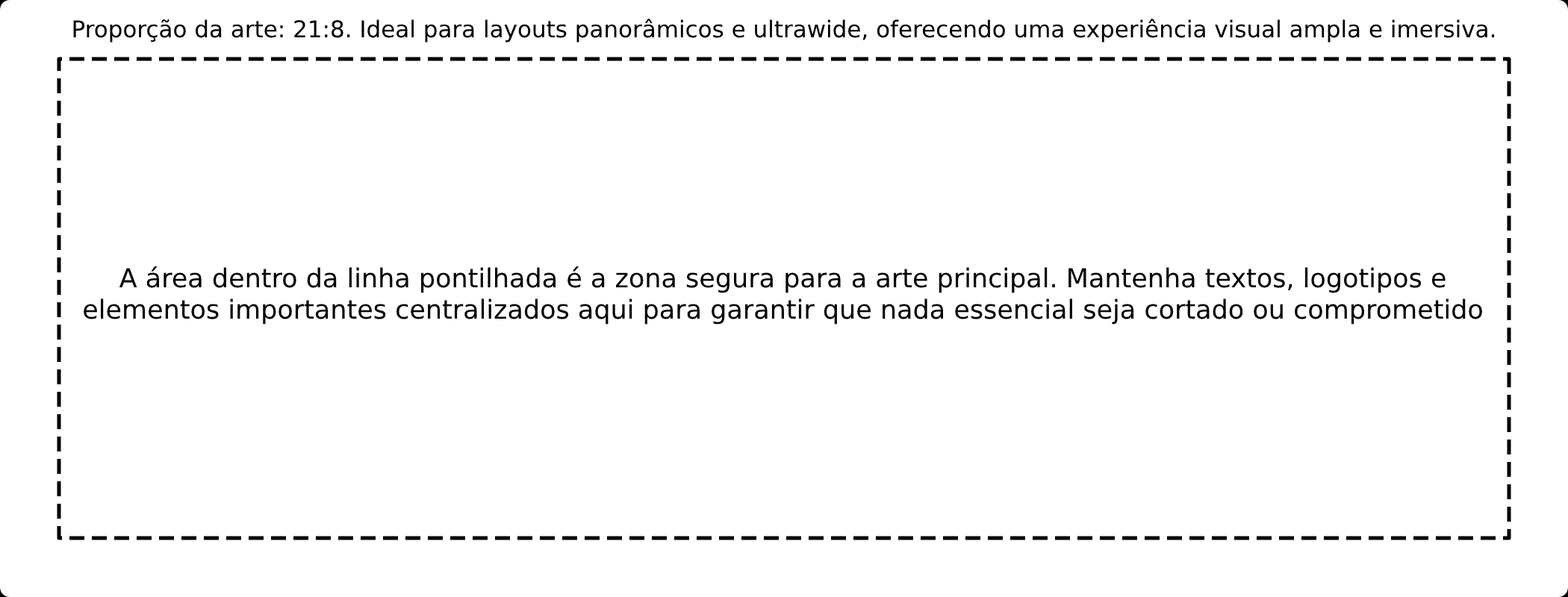
<style>
.page{position:relative;width:1568px;height:597px;background:#ffffff}
.page>*{position:absolute;margin:0}
.t1{font:23.1px "DejaVuSans";color:#000000}
.t2{font:26.1px "DejaVuSans";color:#000000}
</style>
<div class="page">
<p class="t1" style="left:73px;top:19px;width:1422px;height:24px">Proporção da arte: 21:8. Ideal para layouts panorâmicos e ultrawide, oferecendo uma experiência visual ampla e imersiva.</p>
<p class="t2" style="left:84px;top:267px;width:1398px;height:58px;text-align:center">A área dentro da linha pontilhada é a zona segura para a arte principal. Mantenha textos, logotipos e elementos importantes centralizados aqui para garantir que nada essencial seja cortado ou comprometido</p>
</div>
